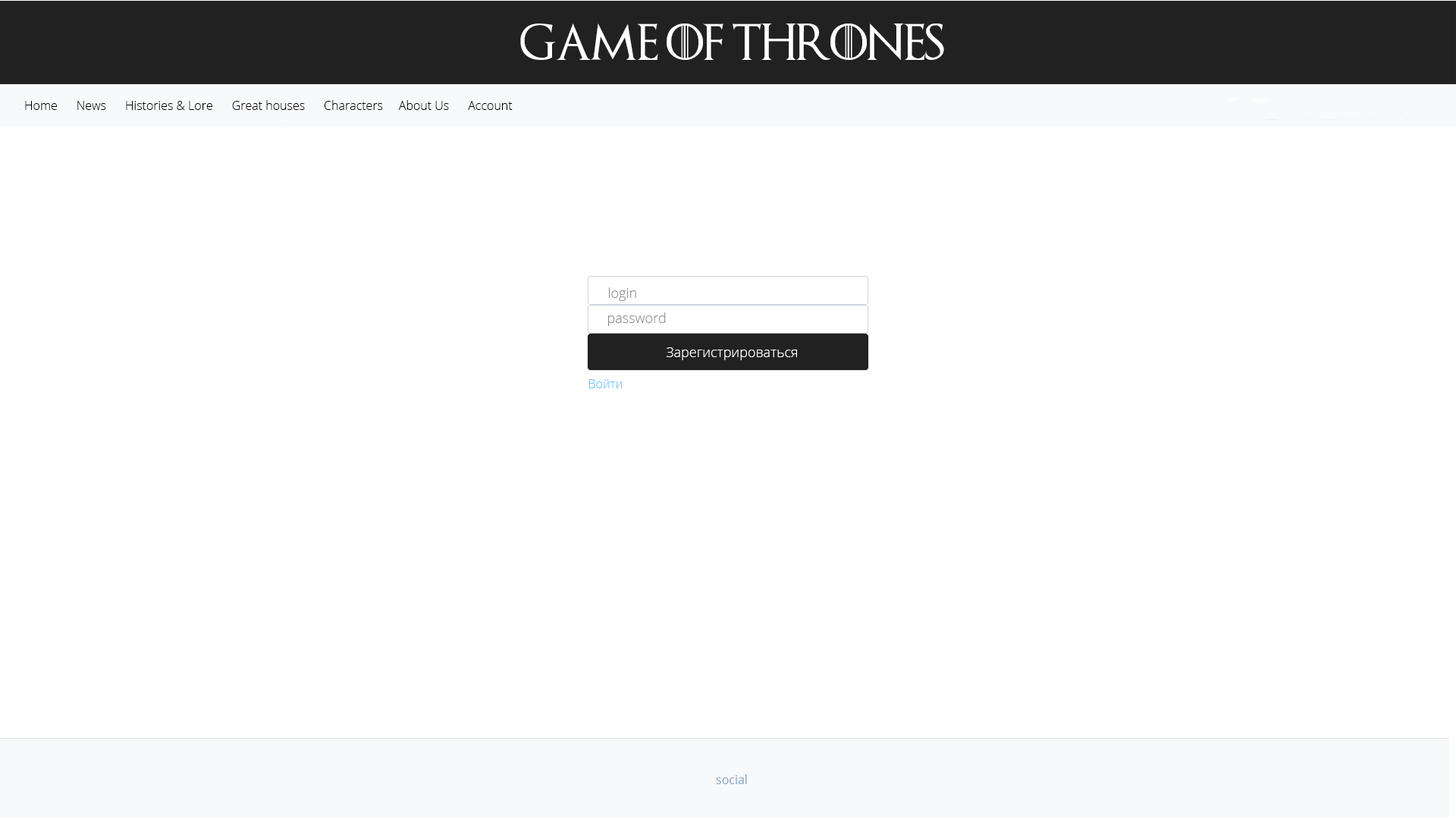
<style>
.page{position:relative;width:1456px;height:819px;background:#ffffff}
.page>*{position:absolute;margin:0}
.t1{font:36.4px "GameofThrones";color:#ffffff}
.t2{font:12.1px "OpenSans-Light";color:#000000}
.t3{font:13.6px "OpenSans-Light";color:#909090}
.t4{font:13.6px "OpenSans-Light";color:#ffffff}
.t5{font:12.1px "OpenSans-Light";color:#6cc5ff}
.t6{font:12.1px "OpenSans-Regular";color:#83a3c4}
</style>
<div class="page">
<p class="t1" style="left:520px;top:24px;width:424px;height:36px">Game of Thrones</p>
<p class="t2" style="left:25px;top:100px;width:488px;height:10px">Home      News      Histories &amp; Lore      Great houses      Сharacters     About Us      Account</p>
<p class="t3" style="left:609px;top:287px;width:27px;height:14px">login</p>
<p class="t3" style="left:608px;top:312px;width:58px;height:14px">password</p>
<p class="t4" style="left:667px;top:347px;width:130px;height:13px">Зарегистрироваться</p>
<p class="t5" style="left:589px;top:379px;width:33px;height:9px">Войти</p>
<p class="t6" style="left:716px;top:774px;width:31px;height:10px">social</p>
</div>
